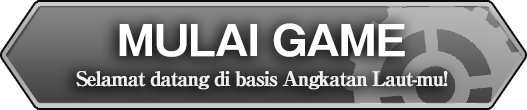
<style>
.page{position:relative;width:527px;height:110px}
.page>*{position:absolute;margin:0}
.t1{font:20px/30px "RyuminPro-ExBold";letter-spacing:-0.08em;color:#efefef;font-weight:bold}
.t2{font:40px/30px "GothicMB101Pro-DeBold";letter-spacing:-0.04em;color:#ffffff;font-weight:bold}
</style>
<div class="page">
<p class="t1" style="left:76px;top:23px;width:372px;height:67px;text-align:center"><span class="t2">MULAI GAME<br></span>Selamat datang di basis Angkatan Laut-mu!</p>
</div>
